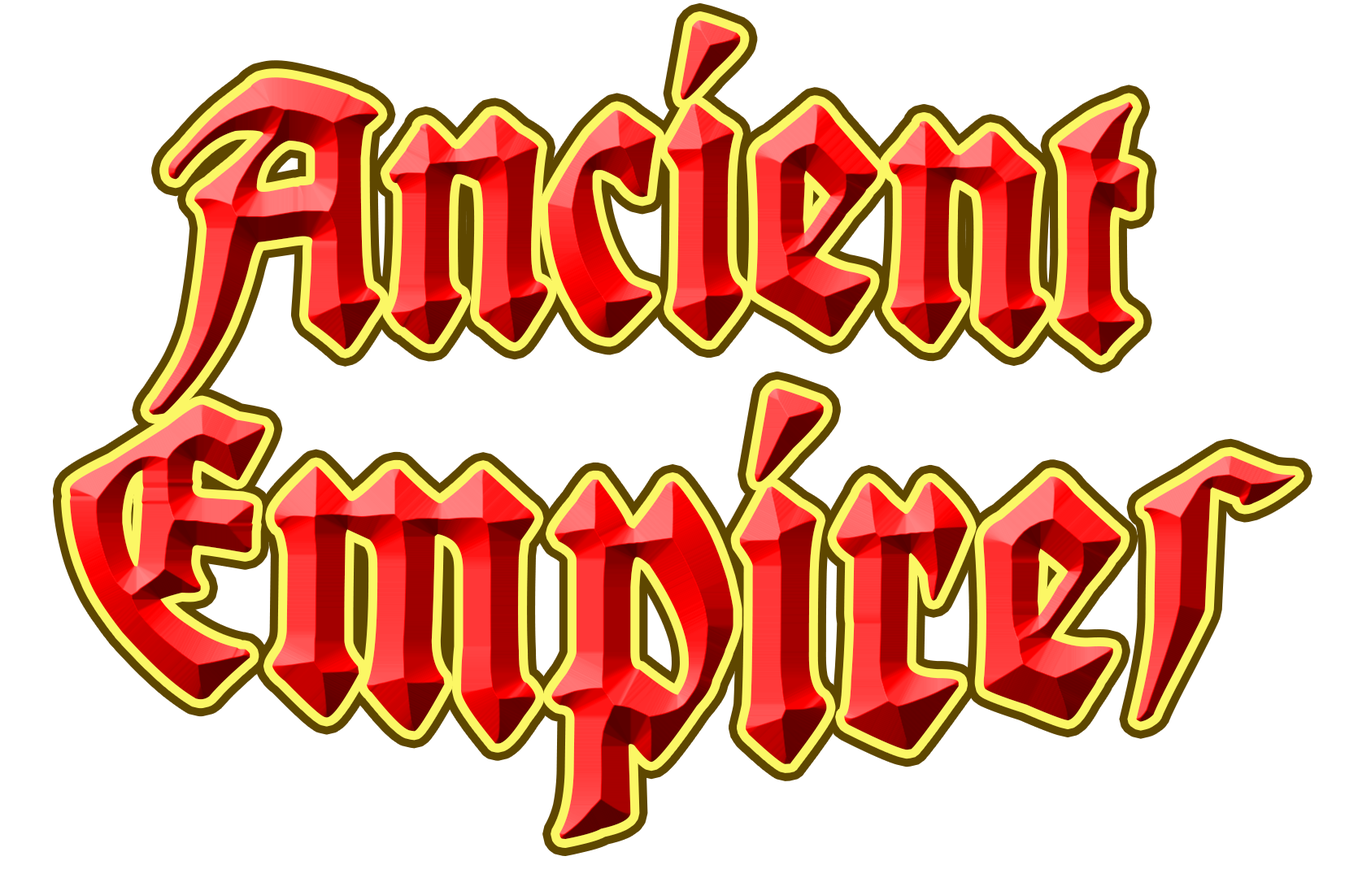
<style>
.page{position:relative;width:1358px;height:878px;background:#ffffff}
.page>*{position:absolute;margin:0}
.t1{font:177.5px "KingArthurLegend";scale:1.11 1}
.t2{font:208.6px "KingArthurLegend";scale:1.11 1}
.t3{font:134.4px "KingArthurLegend";scale:1.73 1}
</style>
<div class="page">
<p class="t1" style="left:70px;top:20px;width:1225px;height:819px;text-align:center">Ancient <br><span class="t2">Empire</span><span class="t3">s</span></p>
</div>
